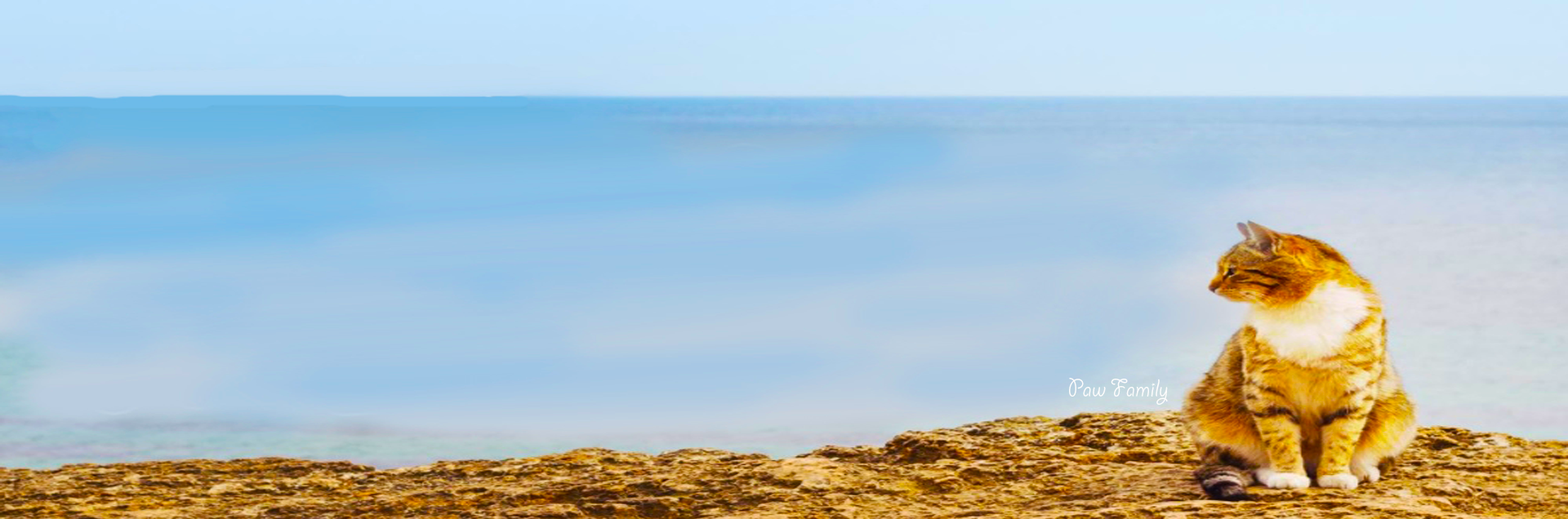
<style>
.page{position:relative;width:1568px;height:519px}
.page>*{position:absolute;margin:0}
.t1{font:27.4px "GiddyupStd";color:#fcfcfc}
</style>
<div class="page">
<p class="t1" style="left:1069px;top:378px;width:99px;height:27px">Paw Family</p>
</div>
